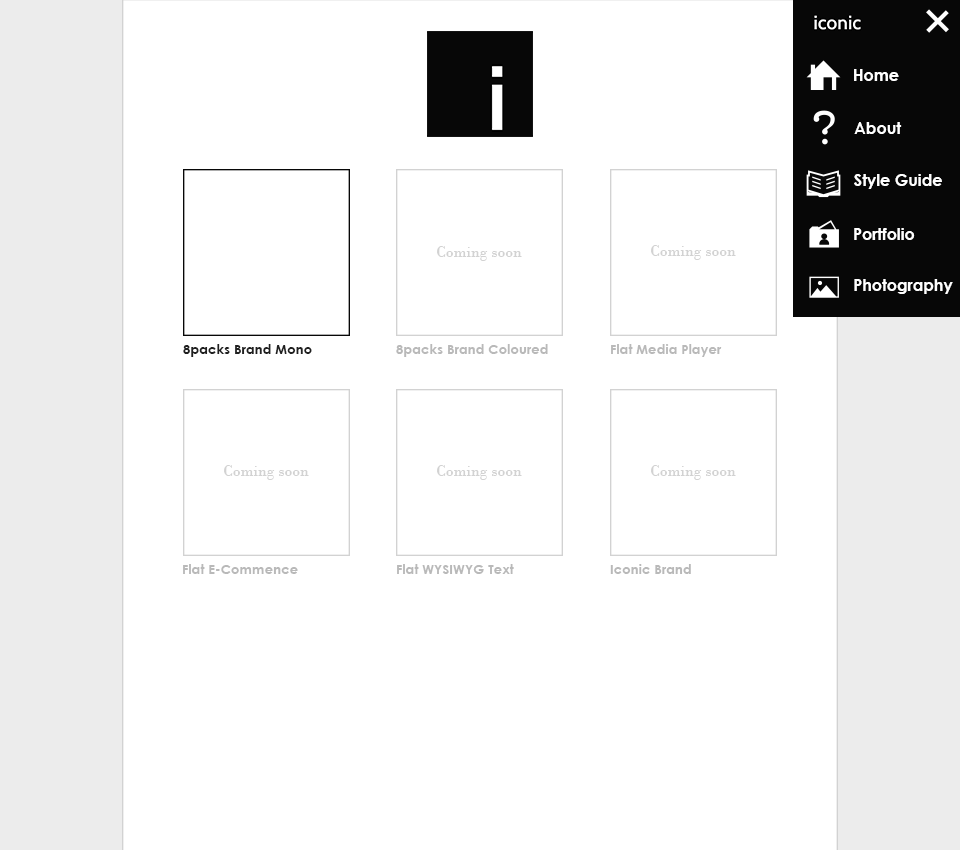
<style>
.page{position:relative;width:960px;height:850px;background:#ffffff}
.page>*{position:absolute;margin:0}
.t1{font:16px "CenturyGothic-Bold";color:#ffffff}
.t2{font:16px "BodoniMT";color:#d2d2d2}
.t3{font:12px "CenturyGothic-Bold";color:#ffffff}
.t4{font:13.3px "CenturyGothic-Bold";color:#202020}
.t5{font:13.3px "CenturyGothic-Bold";color:#b9b9b9}
</style>
<div class="page">
<p class="t1" style="left:854px;top:69px;width:45px;height:12px">Home</p>
<p class="t1" style="left:854px;top:122px;width:48px;height:12px">About</p>
<p class="t1" style="left:854px;top:174px;width:88px;height:15px">Style Guide</p>
<p class="t1" style="left:854px;top:228px;width:61px;height:12px">Portfolio</p>
<p class="t2" style="left:437px;top:246px;width:85px;height:15px">Coming soon</p>
<p class="t2" style="left:651px;top:245px;width:85px;height:15px">Coming soon</p>
<p class="t3" style="left:854px;top:279px;width:99px;height:15px">Photography</p>
<p class="t4" style="left:183px;top:344px;width:129px;height:13px">8packs Brand Mono</p>
<p class="t5" style="left:396px;top:344px;width:152px;height:13px">8packs Brand Coloured</p>
<p class="t5" style="left:611px;top:344px;width:111px;height:13px">Flat Media Player</p>
<p class="t2" style="left:224px;top:465px;width:85px;height:15px">Coming soon</p>
<p class="t2" style="left:437px;top:465px;width:85px;height:15px">Coming soon</p>
<p class="t2" style="left:651px;top:465px;width:85px;height:15px">Coming soon</p>
<p class="t5" style="left:183px;top:564px;width:115px;height:10px">Flat E-Commence</p>
<p class="t5" style="left:397px;top:564px;width:117px;height:10px">Flat WYSIWYG Text</p>
<p class="t5" style="left:610px;top:564px;width:81px;height:10px">Iconic Brand</p>
</div>
